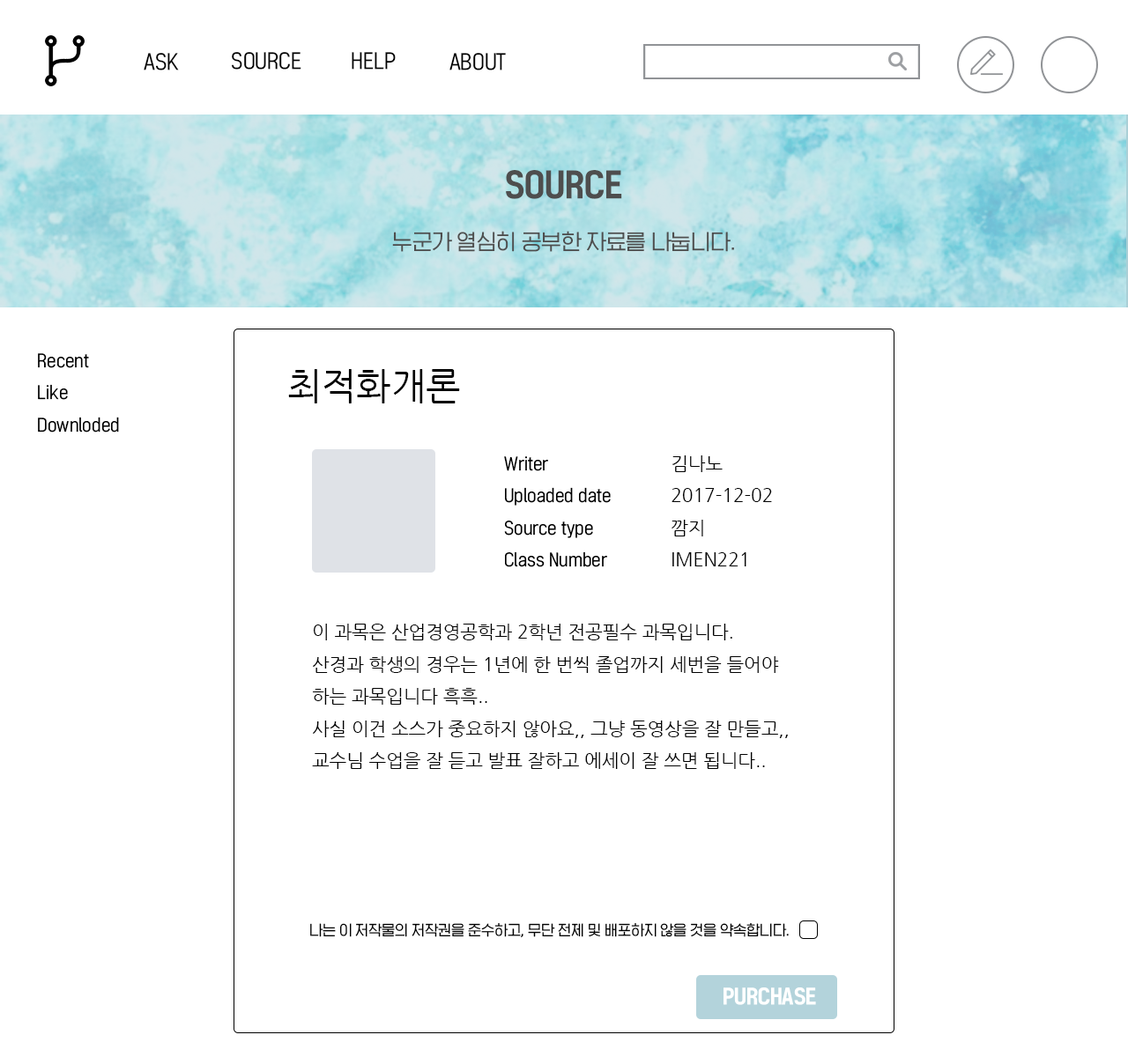
<style>
.page{position:relative;width:1128px;height:1057px;background:#ffffff}
.page>*{position:absolute;margin:0}
.t1{font:22px "HGGGothicssi40g";color:#000000}
.t2{font:22px "HGGGothicssi40g";color:#4e4e4e}
.t3{font:36.7px "HGGGothicssi80g";color:#4e4e4e}
.t4{font:18.4px "HGGGothicssi40g";color:#000000}
.t5{font:36.7px "NanumGothic";color:#000000}
.t6{font:18.4px "NanumGothic";color:#000000}
.t7{font:14.7px "HGGGothicssi40g";color:#000000}
</style>
<div class="page">
<p class="t1" style="left:144px;top:53px;width:35px;height:17px">ASK</p>
<p class="t1" style="left:232px;top:52px;width:69px;height:18px">SOURCE</p>
<p class="t1" style="left:352px;top:52px;width:44px;height:18px">HELP</p>
<p class="t1" style="left:449px;top:53px;width:57px;height:17px">ABOUT</p>
<p class="t2" style="left:392px;top:170px;width:342px;height:82px;text-align:center"><span class="t3">SOURCE<br></span>누군가 열심히 공부한 자료를 나눕니다.</p>
<p class="t4" style="left:38px;top:353px;width:81px;height:80px">Recent<br>Like<br>Downloded</p>
<p class="t5" style="left:288px;top:369px;width:172px;height:35px">최적화개론</p>
<p class="t4" style="left:504px;top:456px;width:107px;height:111px">Writer<br>Uploaded date<br>Source type<br>Class Number</p>
<p class="t6" style="left:671px;top:456px;width:101px;height:111px">김나노<br>2017-12-02<br>깜지<br>IMEN221</p>
<p class="t6" style="left:312px;top:624px;width:476px;height:145px">이 과목은 산업경영공학과 2학년 전공필수 과목입니다.<br>산경과 학생의 경우는 1년에 한 번씩 졸업까지 세번을 들어야 하는 과목입니다 흑흑..<br>사실 이건 소스가 중요하지 않아요,, 그냥 동영상을 잘 만들고,, 교수님 수업을 잘 듣고 발표 잘하고 에세이 잘 쓰면 됩니다..</p>
<p class="t7" style="left:310px;top:923px;width:479px;height:14px">나는 이 저작물의 저작권을 준수하고, 무단 전제 및 배포하지 않을 것을 약속합니다.</p>
</div>
